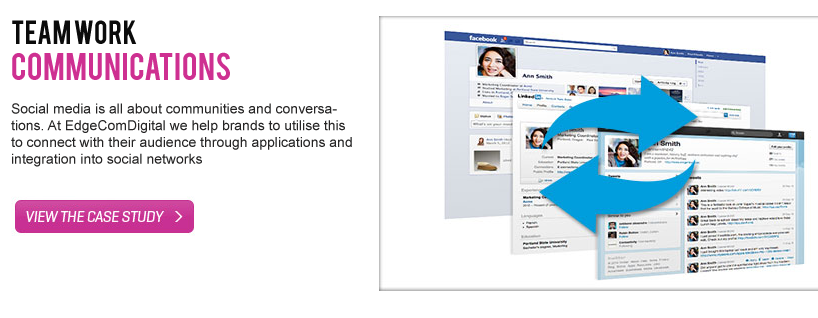
<style>
.page{position:relative;width:818px;height:318px;background:#ffffff}
.page>*{position:absolute;margin:0}
.t1{font:14px "ArialMT";color:#262525}
.t2{font:18px "ArialMT";color:#000000}
.t3{font:26px "Bebas";color:#0b0b0b}
.t4{font:30px "Bebas";color:#ce3091}
</style>
<div class="page">
<p class="t1" style="left:11px;top:20px;width:341px;height:147px"><span class="t2"> <br></span><span class="t3">Team Work<br></span><span class="t4">Communications<br><br></span>Social media is all about communities and conversations. At EdgeComDigital we help brands to utilise this to connect with their audience through applications and integration into social networks</p>
</div>
